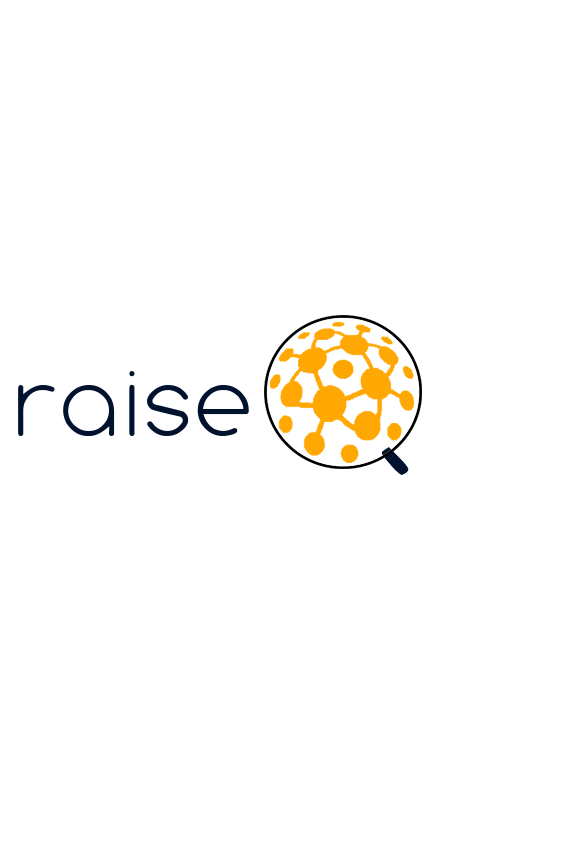
<style>
.page{position:relative;width:576px;height:864px;background:#ffffff}
.page>*{position:absolute;margin:0}
.t1{font:106.7px "Comfortaa-Thin";color:#01122e}
</style>
<div class="page">
<p class="t1" style="left:18px;top:371px;width:231px;height:65px">raise</p>
</div>
